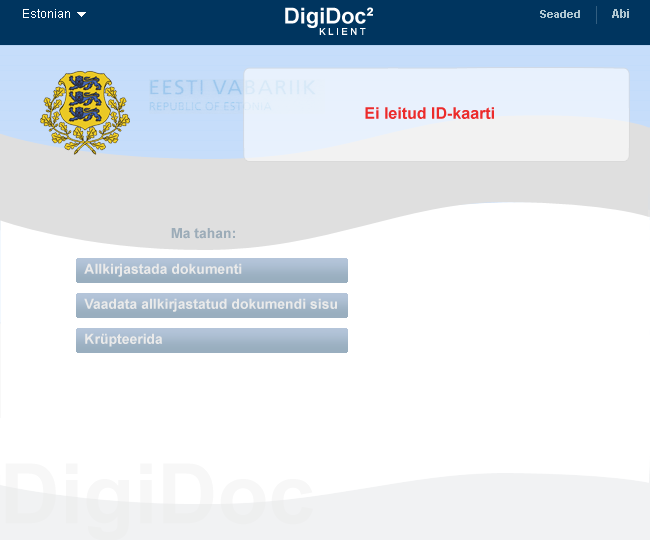
<style>
.page{position:relative;width:650px;height:540px;background:#ffffff}
.page>*{position:absolute;margin:0}
.t1{font:12px "ArialMT";color:#ffffff}
.t2{font:21.9px "Arial-BoldMT";color:#ffffff}
.t3{font:11px "Arial-BoldMT";color:#afc6d1}
.t4{font:12px "Arial-BoldMT";color:#afc6d1}
.t5{font:9.2px "ArialMT";letter-spacing:0.3em;color:#ffffff}
.t6{font:16px "Arial-BoldMT";color:#ec2b2b}
.t7{font:14px "Arial-BoldMT";color:#9cacb8}
.t8{font:83.4px "Arial-BoldMT";color:#eaeaea}
</style>
<div class="page">
<p class="t1" style="left:23px;top:9px;width:47px;height:9px">Estonian</p>
<p class="t2" style="left:285px;top:7px;width:88px;height:21px">DigiDoc²</p>
<p class="t3" style="left:540px;top:10px;width:40px;height:8px">Seaded</p>
<p class="t4" style="left:612px;top:9px;width:17px;height:9px">Abi</p>
<p class="t5" style="left:319px;top:28px;width:47px;height:7px">KLIENT</p>
<p class="t6" style="left:365px;top:107px;width:129px;height:12px">Ei leitud ID-kaarti</p>
<p class="t7" style="left:171px;top:228px;width:64px;height:11px">Ma tahan:</p>
<p class="t8" style="left:5px;top:463px;width:308px;height:78px;opacity:0.4">DigiDoc</p>
</div>
